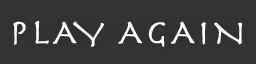
<style>
.page{position:relative;width:256px;height:64px;background:#333333}
.page>*{position:absolute;margin:0}
.t1{font:36.3px "Herculanum";letter-spacing:0.075em;color:#fefefe;text-transform:uppercase}
</style>
<div class="page">
<p class="t1" style="left:13px;top:20px;width:229px;height:27px">PLAY AGAIN</p>
</div>
